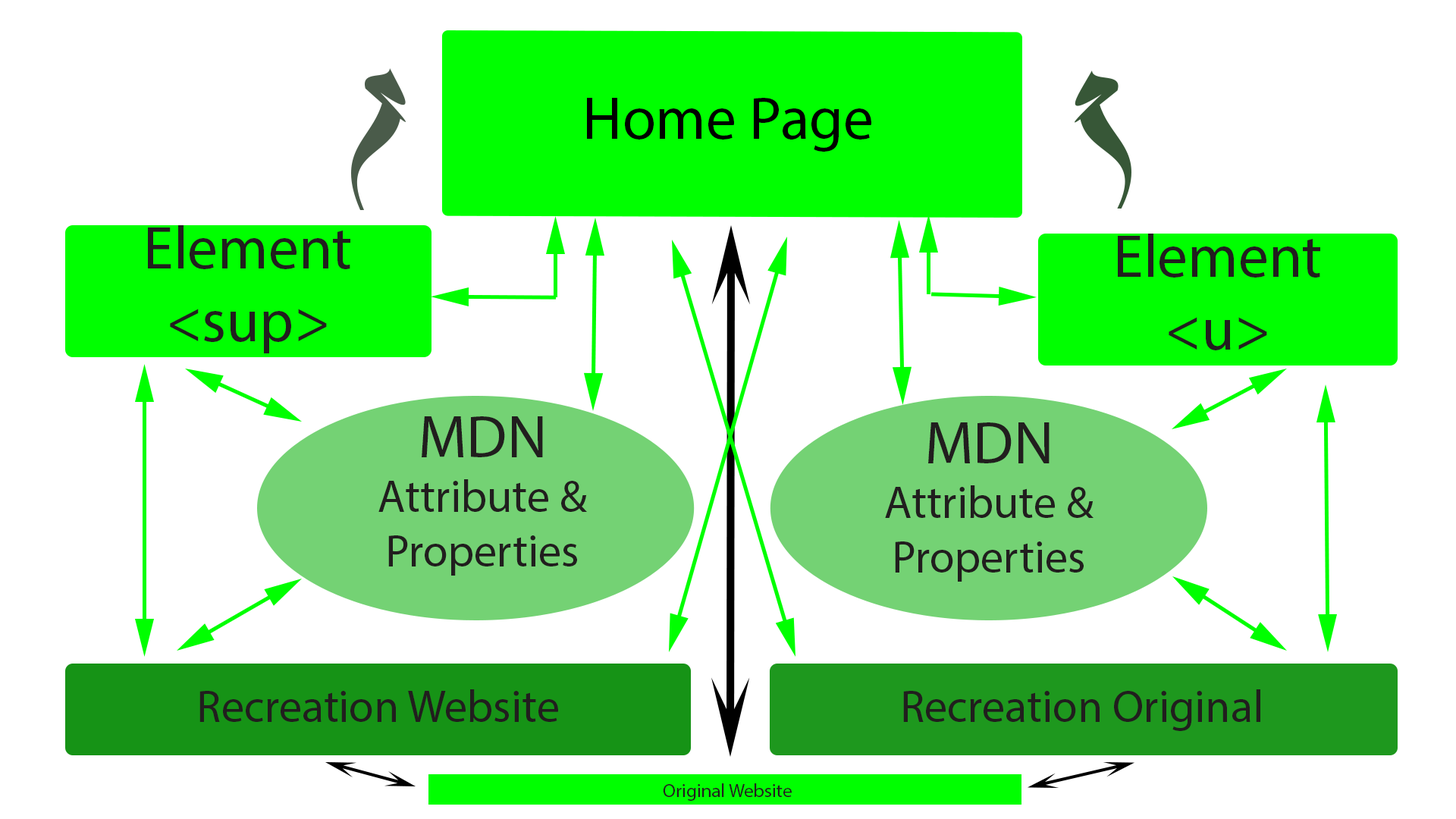
<style>
.page{position:relative;width:1456px;height:819px;background:#ffffff}
.page>*{position:absolute;margin:0}
.t1{font:60.7px "MyriadPro-Regular";color:#000000}
.t2{font:60.7px "MyriadPro-Regular";color:#211e1e}
.t3{font:45.5px "MyriadPro-Regular";color:#211e1e}
.t4{font:19px "MyriadPro-Regular";color:#211e1e}
</style>
<div class="page">
<p class="t1" style="left:587px;top:98px;width:284px;height:54px">Home Page</p>
<p class="t2" style="left:148px;top:225px;width:202px;height:128px;text-align:center">Element <br>&lt;sup&gt;</p>
<p class="t2" style="left:1118px;top:234px;width:202px;height:116px;text-align:center">Element <br>&lt;u&gt;</p>
<p class="t3" style="left:378px;top:416px;width:209px;height:160px;text-align:center"><span class="t2">MDN</span><br>Attribute &amp;<br>Properties</p>
<p class="t3" style="left:885px;top:422px;width:209px;height:160px;text-align:center"><span class="t2">MDN</span><br>Attribute &amp;<br>Properties</p>
<p class="t3" style="left:199px;top:689px;width:359px;height:33px">Recreation Website</p>
<p class="t3" style="left:903px;top:689px;width:357px;height:42px">Recreation Original</p>
<p class="t4" style="left:663px;top:783px;width:129px;height:18px">Original Website</p>
</div>
